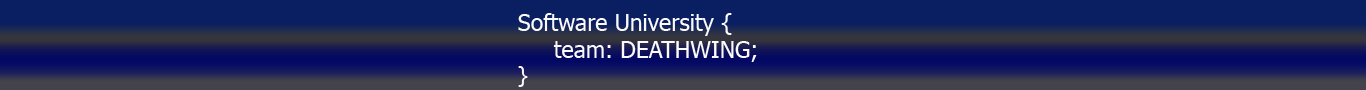
<style>
.page{position:relative;width:1366px;height:90px;background:#0a1f62}
.page>*{position:absolute;margin:0}
.t1{font:23px "Tahoma";color:#fbf9f9}
.t2{font:21px "Tahoma";color:#fbf9f9}
</style>
<div class="page">
<p class="t1" style="left:518px;top:13px;width:239px;height:74px">Software University {<br> team: DEATHWING;<br><span class="t2">}</span></p>
</div>
